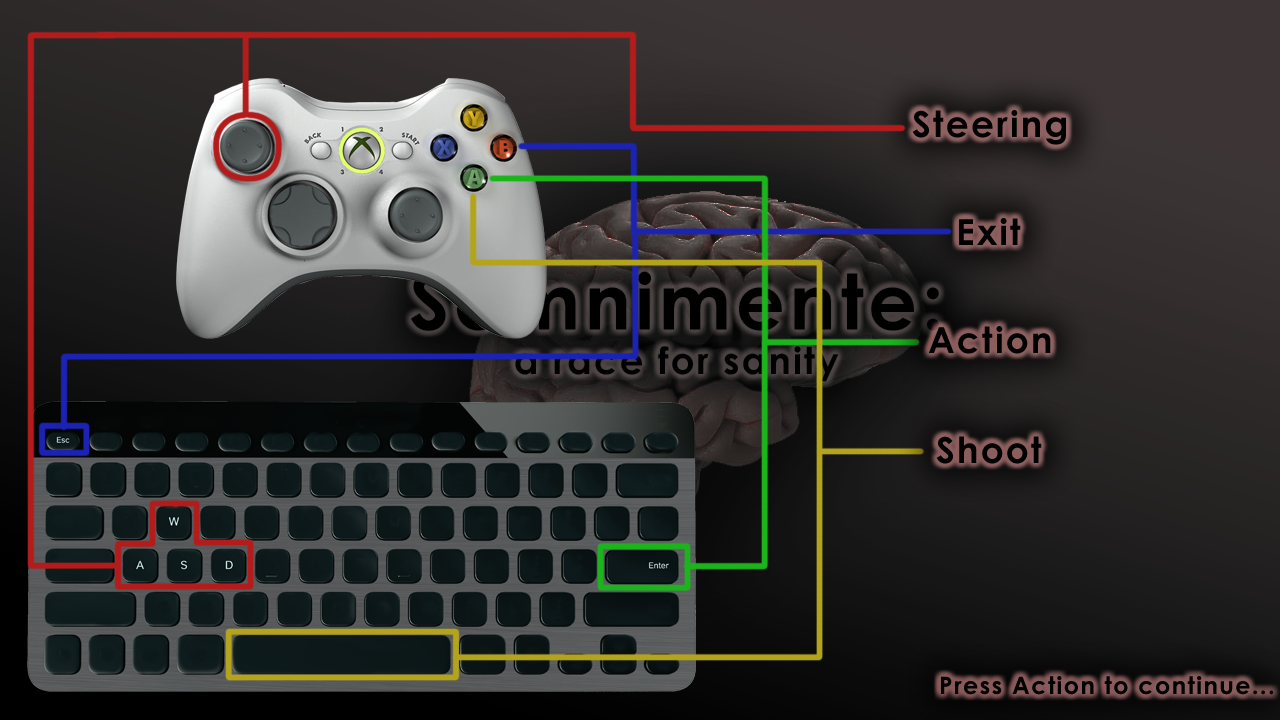
<style>
.page{position:relative;width:1280px;height:720px}
.page>*{position:absolute;margin:0}
.t1{font:36px "CenturyGothic-Bold";letter-spacing:0.06em;color:#000000}
.t2{font:24px "CenturyGothic-Bold";letter-spacing:0.06em;color:#000000}
</style>
<div class="page">
<p class="t1" style="left:912px;top:110px;width:154px;height:35px">Steering</p>
<p class="t1" style="left:959px;top:218px;width:62px;height:27px">Exit</p>
<p class="t1" style="left:929px;top:326px;width:122px;height:28px">Action</p>
<p class="t1" style="left:936px;top:436px;width:106px;height:28px">Shoot</p>
<p class="t2" style="left:941px;top:676px;width:333px;height:19px">Press Action to continue...</p>
</div>
